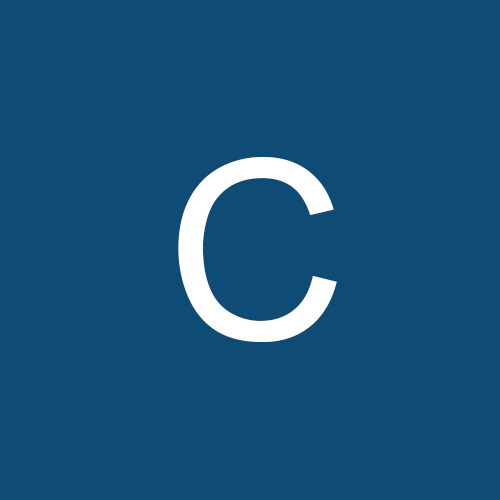
<style>
.page{position:relative;width:500px;height:500px;background:#0f4c75}
.page>*{position:absolute;margin:0}
.t1{font:250px "ArialMT";color:#ffffff}
</style>
<div class="page">
<p class="t1" style="left:178px;top:157px;width:159px;height:185px">C</p>
</div>
